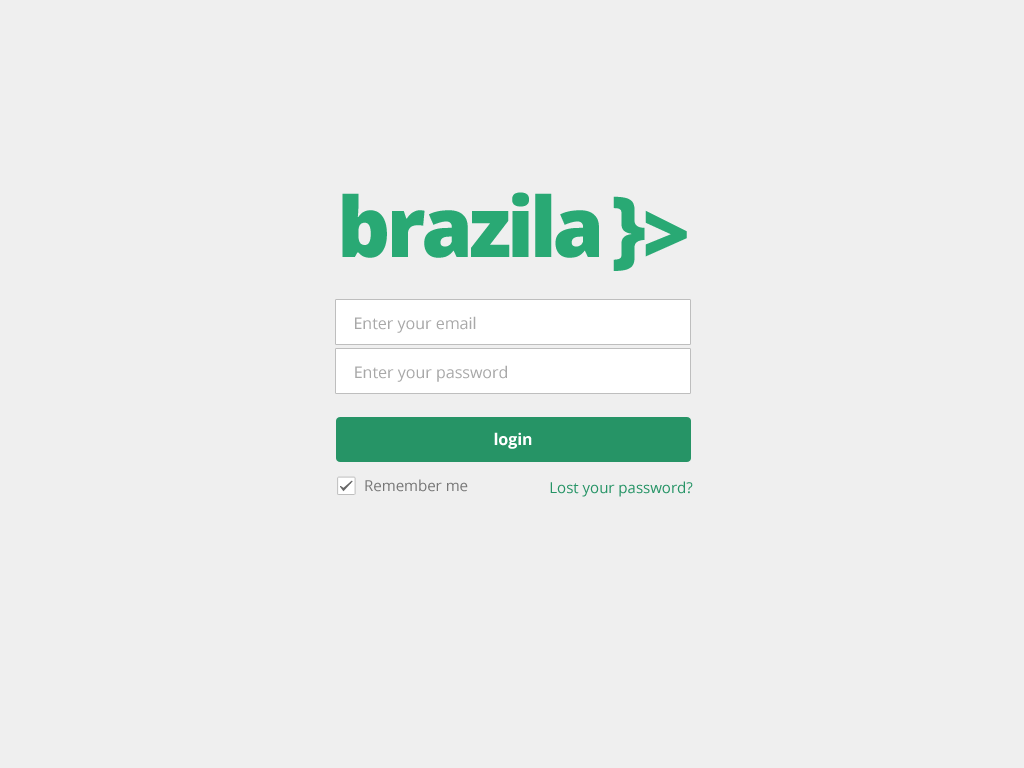
<style>
.page{position:relative;width:1024px;height:768px;background:#efefef}
.page>*{position:absolute;margin:0}
.t1{font:83.2px "OpenSans-Extrabold";letter-spacing:-0.05em;color:#29a974}
.t2{font:16px "OpenSans";color:#a8a8a8}
.t3{font:16px "OpenSans-Bold";color:#ffffff}
.t4{font:15px "OpenSans";color:#777777}
.t5{font:15px "OpenSans";color:#269466}
</style>
<div class="page">
<p class="t1" style="left:342px;top:192px;width:257px;height:66px">brazila</p>
<p class="t1" style="left:613px;top:196px;width:32px;height:75px">}</p>
<p class="t1" style="left:645px;top:210px;width:42px;height:47px">&gt;</p>
<p class="t2" style="left:355px;top:316px;width:121px;height:17px">Enter your email</p>
<p class="t2" style="left:355px;top:365px;width:152px;height:17px">Enter your password</p>
<p class="t3" style="left:494px;top:432px;width:38px;height:17px">login</p>
<p class="t4" style="left:365px;top:479px;width:103px;height:13px">Remember me</p>
<p class="t5" style="left:550px;top:481px;width:143px;height:16px">Lost your password?</p>
</div>
